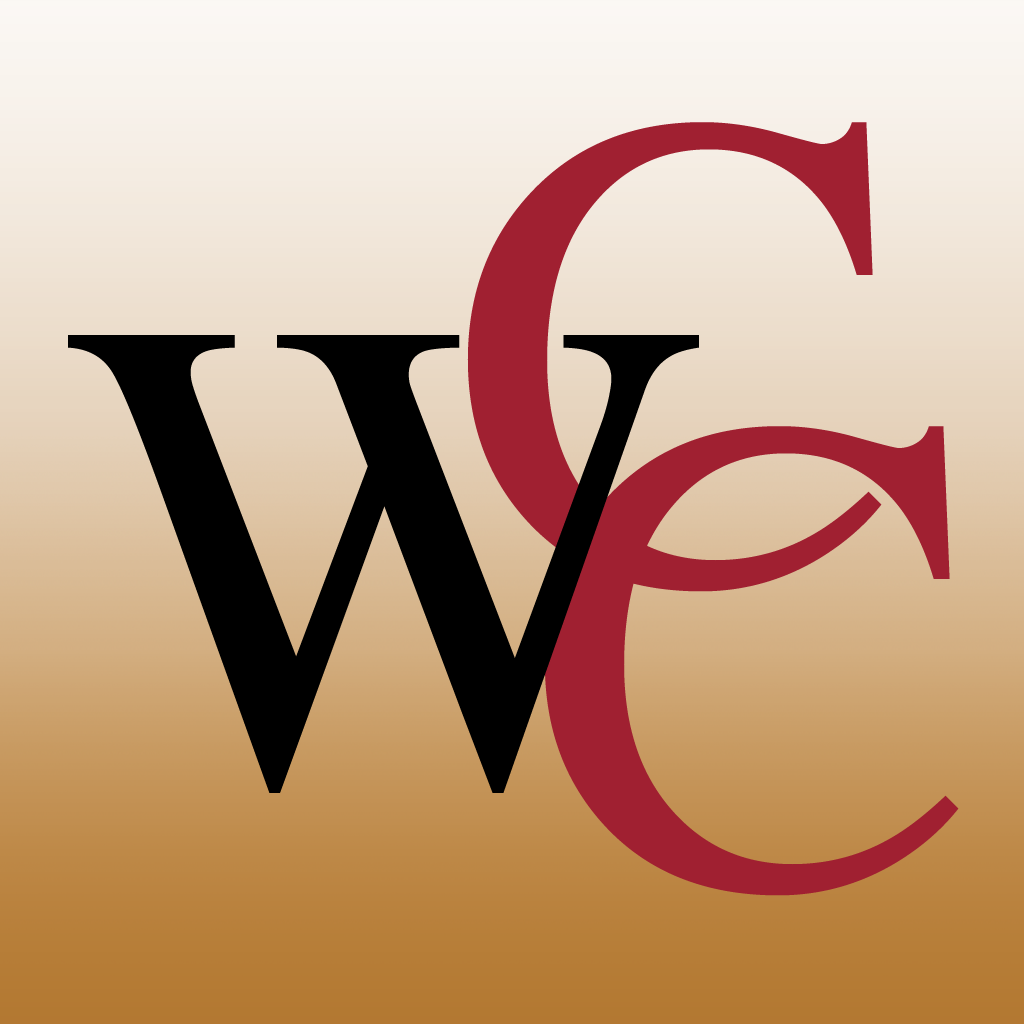
<style>
.page{position:relative;width:1024px;height:1024px}
.page>*{position:absolute;margin:0}
.t1{font:680px "Times-Roman";color:#a02031}
.t2{font:680px "Times-Roman";color:#000000}
</style>
<div class="page">
<p class="t1" style="left:467px;top:122px;width:415px;height:470px">C</p>
<p class="t2" style="left:68px;top:335px;width:631px;height:458px">W</p>
<p class="t1" style="left:544px;top:426px;width:415px;height:470px">C</p>
</div>
